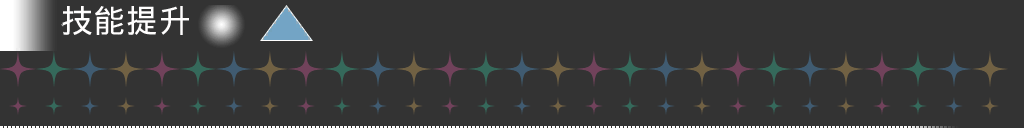
<style>
.page{position:relative;width:1024px;height:128px;background:#333333}
.page>*{position:absolute;margin:0}
.t1{font:32px "WenQuanYiMicroHeiMono";letter-spacing:0.025em;color:#fffefe}
</style>
<div class="page">
<p class="t1" style="left:62px;top:6px;width:127px;height:29px">技能提升</p>
</div>
